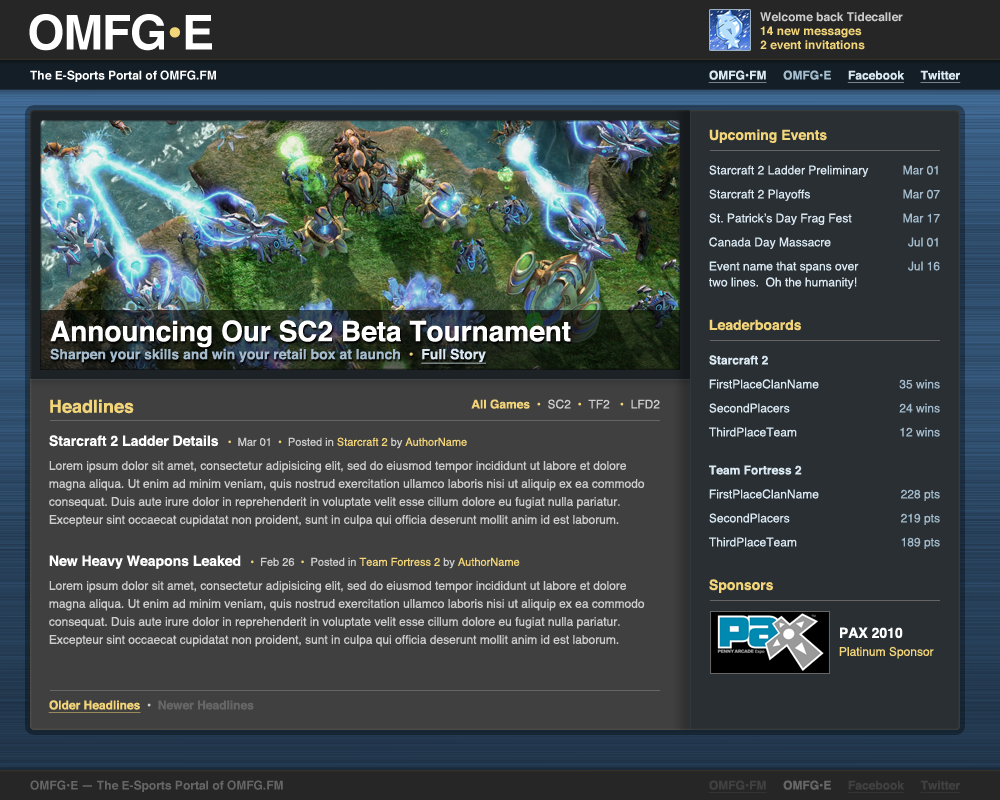
<style>
.page{position:relative;width:1000px;height:800px;background:#404040}
.page>*{position:absolute;margin:0}
.t1{font:48px "Helvetica-Bold";letter-spacing:-0.025em;color:#ffffff}
.t2{font:48px "Helvetica-Bold";letter-spacing:-0.025em;color:#f2d479}
.t3{font:12px/14px "Helvetica-Bold";color:#f2d479}
.t4{font:12px/14px "Helvetica-Bold";color:#cccccc}
.t5{font:12px "Helvetica-Bold";color:#ffffff}
.t6{font:12px "Helvetica-Bold";color:#dae8f2;text-decoration:underline}
.t7{font:12px "Helvetica-Bold";color:#a3bbcc}
.t8{font:14px "Helvetica-Bold";color:#f2d479}
.t9{font:12px/24px "Helvetica";color:#dae8f2}
.t10{font:12px/16px "Helvetica";color:#dae8f2}
.t11{font:12px/24px "Helvetica";color:#a3bbcc}
.t12{font:14px/18px "Helvetica-Bold";color:#a3bbcc}
.t13{font:28px "Helvetica-Bold";color:#ffffff}
.t14{font:14px/18px "Helvetica-Bold";color:#f2d479}
.t15{font:14px/18px "Helvetica-Bold";color:#dae8f2;text-decoration:underline}
.t16{font:12px/24px "Helvetica-Bold";color:#dae8f2}
.t17{font:18px "Helvetica-Bold";color:#f2d479}
.t18{font:12px "Helvetica-Bold";color:#f2d479}
.t19{font:12px "Helvetica";color:#cccccc}
.t20{font:12px/18px "Helvetica";color:#cccccc}
.t21{font:14px/24px "Helvetica-Bold";color:#ffffff}
.t22{font:11px/24px "Helvetica";color:#f2d479}
.t23{font:11px/24px "Helvetica";color:#cccccc}
.t24{font:12px/24px "Helvetica";color:#cccccc}
.t25{font:12px/18px "Helvetica";color:#f2d479}
.t26{font:12px "Helvetica-Bold";color:#f2d479;text-decoration:underline}
.t27{font:12px "Helvetica-Bold";color:#cccccc}
.t28{font:12px "Helvetica-Bold";color:#666666}
.t29{font:12px "Helvetica-Bold";color:#404040;text-decoration:underline}
</style>
<div class="page">
<p class="t1" style="left:29px;top:14px;width:183px;height:37px">OMFG<span class="t2">•</span>E</p>
<p class="t3" style="left:760px;top:12px;width:143px;height:38px"><span class="t4">Welcome back Tidecaller<br></span>14 new messages<br>2 event invitations</p>
<p class="t5" style="left:30px;top:70px;width:186px;height:12px">The E-Sports Portal of OMFG.FM</p>
<p class="t6" style="left:708px;top:70px;width:253px;height:13px">OMFG•FM     <span class="t7">OMFG•E     </span>Facebook     Twitter</p>
<p class="t8" style="left:709px;top:129px;width:118px;height:14px">Upcoming Events</p>
<p class="t9" style="left:709px;top:165px;width:160px;height:124px">Starcraft 2 Ladder Preliminary<br>Starcraft 2 Playoffs<br>St. Patrick’s Day Frag Fest<br>Canada Day Massacre<br>Event name that spans over <br><span class="t10">two lines.  Oh the humanity!</span></p>
<p class="t11" style="left:903px;top:165px;width:37px;height:106px;text-align:right">Mar 01<br>Mar 07<br>Mar 17<br>Jul 01<br>Jul 16</p>
<p class="t12" style="left:50px;top:320px;width:521px;height:44px"><span class="t13">Announcing Our SC2 Beta Tournament<br></span>Sharpen your skills and win your retail box at launch  <span class="t14">•  </span><span class="t15">Full Story</span></p>
<p class="t8" style="left:709px;top:319px;width:92px;height:12px">Leaderboards</p>
<p class="t9" style="left:709px;top:355px;width:110px;height:82px"><span class="t16">Starcraft 2<br></span>FirstPlaceClanName<br>SecondPlacers<br>ThirdPlaceTeam</p>
<p class="t11" style="left:899px;top:379px;width:41px;height:58px;text-align:right">35 wins<br>24 wins<br>12 wins</p>
<p class="t17" style="left:50px;top:399px;width:84px;height:15px">Headlines</p>
<p class="t18" style="left:471px;top:399px;width:189px;height:10px">All Games  •  <span class="t19">SC2  </span>•  <span class="t19">TF2   </span>•  <span class="t19">LFD2</span></p>
<p class="t20" style="left:49px;top:435px;width:596px;height:92px"><span class="t21">Starcraft 2 Ladder Details  </span><span class="t22"> •  </span><span class="t23">Mar 01  </span><span class="t22">•  </span><span class="t23">Posted in </span><span class="t22">Starcraft 2</span><span class="t23"> by </span><span class="t22">AuthorName<br></span><span class="t24">Lorem ipsum dolor sit amet, consectetur adipisicing elit, sed do eiusmod tempor incididunt ut labore et dolore </span>magna aliqua. Ut enim ad minim veniam, quis nostrud exercitation ullamco laboris nisi ut aliquip ex ea commodo consequat. Duis aute irure dolor in reprehenderit in voluptate velit esse cillum dolore eu fugiat nulla pariatur. Excepteur sint occaecat cupidatat non proident, sunt in culpa qui officia deserunt mollit anim id est laborum.</p>
<p class="t9" style="left:709px;top:465px;width:110px;height:82px"><span class="t16">Team Fortress 2<br></span>FirstPlaceClanName<br>SecondPlacers<br>ThirdPlaceTeam</p>
<p class="t11" style="left:901px;top:489px;width:39px;height:60px;text-align:right">228 pts<br>219 pts<br>189 pts</p>
<p class="t20" style="left:49px;top:555px;width:596px;height:92px"><span class="t21">New Heavy Weapons Leaked  </span><span class="t22"> •  </span><span class="t23">Feb 26  </span><span class="t22">•  </span><span class="t23">Posted in </span><span class="t22">Team Fortress 2</span><span class="t23"> by </span><span class="t22">AuthorName<br></span><span class="t24">Lorem ipsum dolor sit amet, consectetur adipisicing elit, sed do eiusmod tempor incididunt ut labore et dolore </span>magna aliqua. Ut enim ad minim veniam, quis nostrud exercitation ullamco laboris nisi ut aliquip ex ea commodo consequat. Duis aute irure dolor in reprehenderit in voluptate velit esse cillum dolore eu fugiat nulla pariatur. Excepteur sint occaecat cupidatat non proident, sunt in culpa qui officia deserunt mollit anim id est laborum.</p>
<p class="t8" style="left:709px;top:579px;width:64px;height:14px">Sponsors</p>
<p class="t25" style="left:839px;top:627px;width:95px;height:32px"><span class="t21">PAX 2010<br></span>Platinum Sponsor</p>
<p class="t26" style="left:48px;top:700px;width:206px;height:13px">Older Headlines  <span class="t27">•  </span><span class="t28">Newer Headlines</span></p>
<p class="t28" style="left:30px;top:780px;width:253px;height:12px">OMFG•E — The E-Sports Portal of OMFG.FM</p>
<p class="t29" style="left:708px;top:780px;width:253px;height:13px">OMFG•FM     <span class="t28">OMFG•E     </span>Facebook     Twitter</p>
</div>
